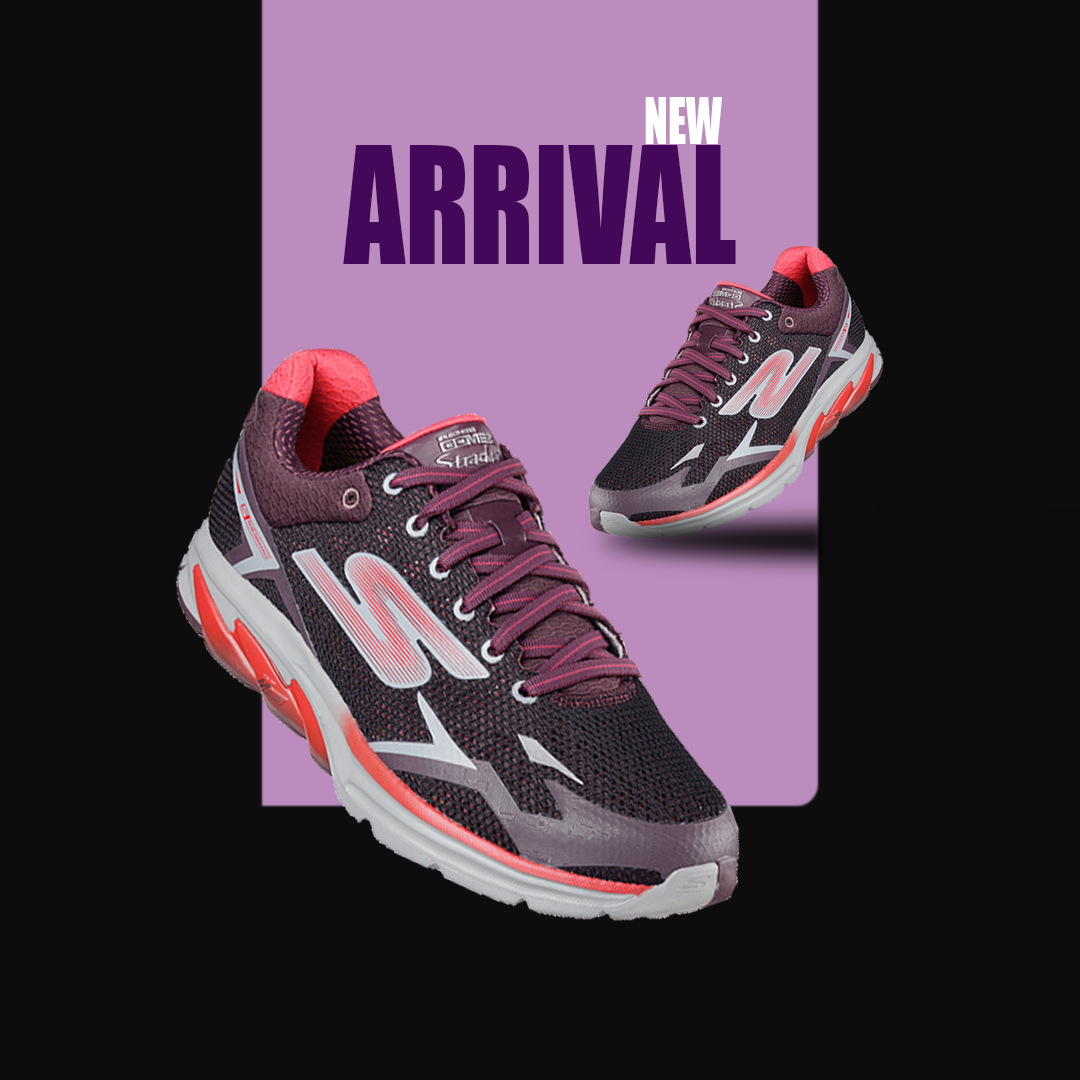
<style>
.page{position:relative;width:1080px;height:1080px;background:#0d0d0d}
.page>*{position:absolute;margin:0}
.t1{font:59.8px "Impact";color:#ffffff;scale:0.74 1}
.t2{font:151.1px "Impact";color:#430859;scale:0.8 1}
</style>
<div class="page">
<p class="t1" style="left:645px;top:97px;width:77px;height:47px">NEW</p>
<p class="t2" style="left:343px;top:145px;width:393px;height:119px">ARRIVAL</p>
</div>
